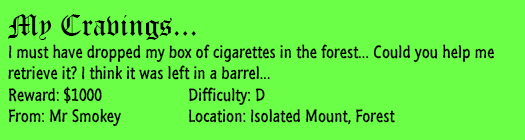
<style>
.page{position:relative;width:525px;height:140px;background:#6cff47}
.page>*{position:absolute;margin:0}
.t1{font:18px "SegoeMarker";color:#000000}
.t2{font:30px "OldEnglishTextMT";color:#000000}
</style>
<div class="page">
<p class="t1" style="left:8px;top:14px;width:486px;height:113px"><span class="t2">My Cravings...<br></span>I must have dropped my box of cigarettes in the forest... Could you help me <br>retrieve it? I think it was left in a barrel...<br>Reward: $1000   Difficulty: D<br>From: Mr Smokey  Location: Isolated Mount, Forest</p>
</div>
